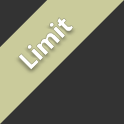
<style>
.page{position:relative;width:124px;height:124px;background:#333333}
.page>*{position:absolute;margin:0}
.t1{font:26px "SegoeUI-Bold";color:#ffffff}
</style>
<div class="page">
<p class="t1" style="left:18px;top:17px;width:56px;height:53px;rotate:-45deg">Limit</p>
</div>
